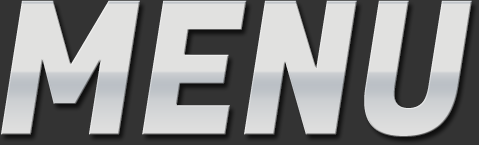
<style>
.page{position:relative;width:479px;height:145px;background:#333333}
.page>*{position:absolute;margin:0}
.t1{font:185.2px "FugazOne-Regular";color:#dfdfdf;scale:0.89 1}
</style>
<div class="page">
<p class="t1" style="left:1px;top:0px;width:471px;height:137px">MENU</p>
</div>
